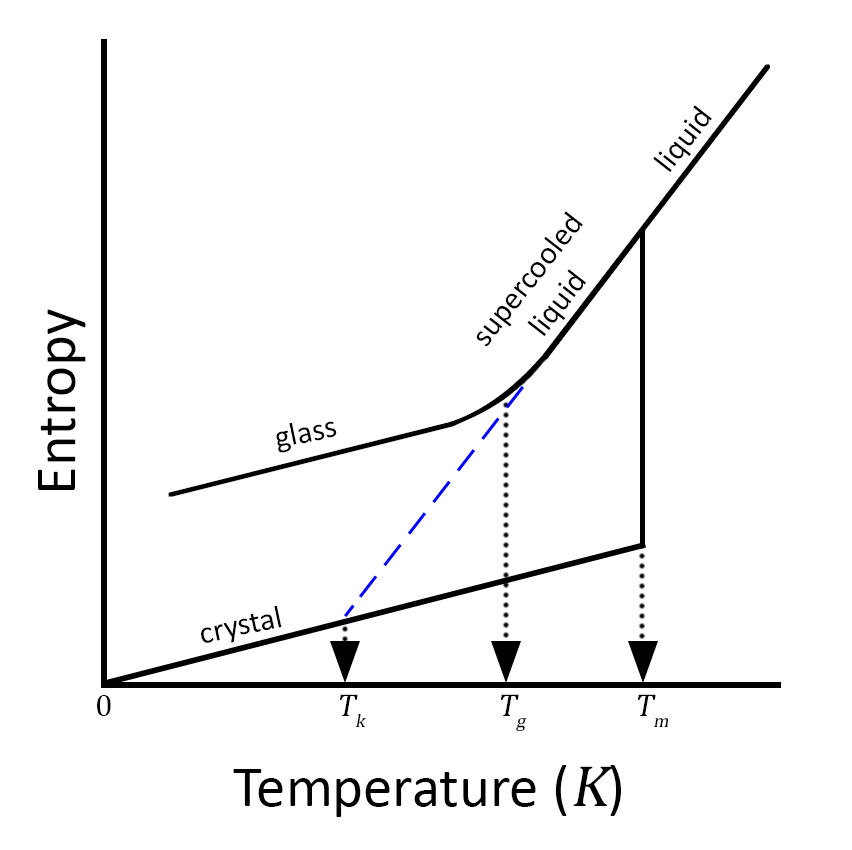
<style>
.page{position:relative;width:852px;height:850px;background:#ffffff}
.page>*{position:absolute;margin:0}
.t1{font:32px "Calibri";color:#000000}
.t2{font:58.7px "Calibri";color:#000000}
.t3{font:32px "CambriaMath";color:#000000}
.t4{font:32px "CambriaMath";color:#000000;font-style:italic}
.t5{font:58.7px "CambriaMath";color:#000000;font-style:italic}
</style>
<div class="page">
<p class="t1" style="left:653px;top:105px;width:59px;height:67px;rotate:-52deg">liquid</p>
<p class="t1" style="left:476px;top:211px;width:110px;height:136px;text-align:center;rotate:-52deg">supercooled<br>liquid</p>
<p class="t2" style="left:38px;top:309px;width:48px;height:181px;rotate:-90deg">Entropy</p>
<p class="t1" style="left:276px;top:421px;width:61px;height:32px;rotate:-12deg">glass</p>
<p class="t1" style="left:201px;top:605px;width:81px;height:38px;rotate:-12deg">crystal</p>
<p class="t3" style="left:97px;top:695px;width:14px;height:21px">0</p>
<p class="t4" style="left:339px;top:694px;width:28px;height:34px">Tk</p>
<p class="t4" style="left:500px;top:694px;width:27px;height:38px">Tg</p>
<p class="t4" style="left:637px;top:694px;width:32px;height:34px">Tm</p>
<p class="t2" style="left:233px;top:765px;width:388px;height:52px">Temperature (<span class="t5">K</span>)</p>
</div>
